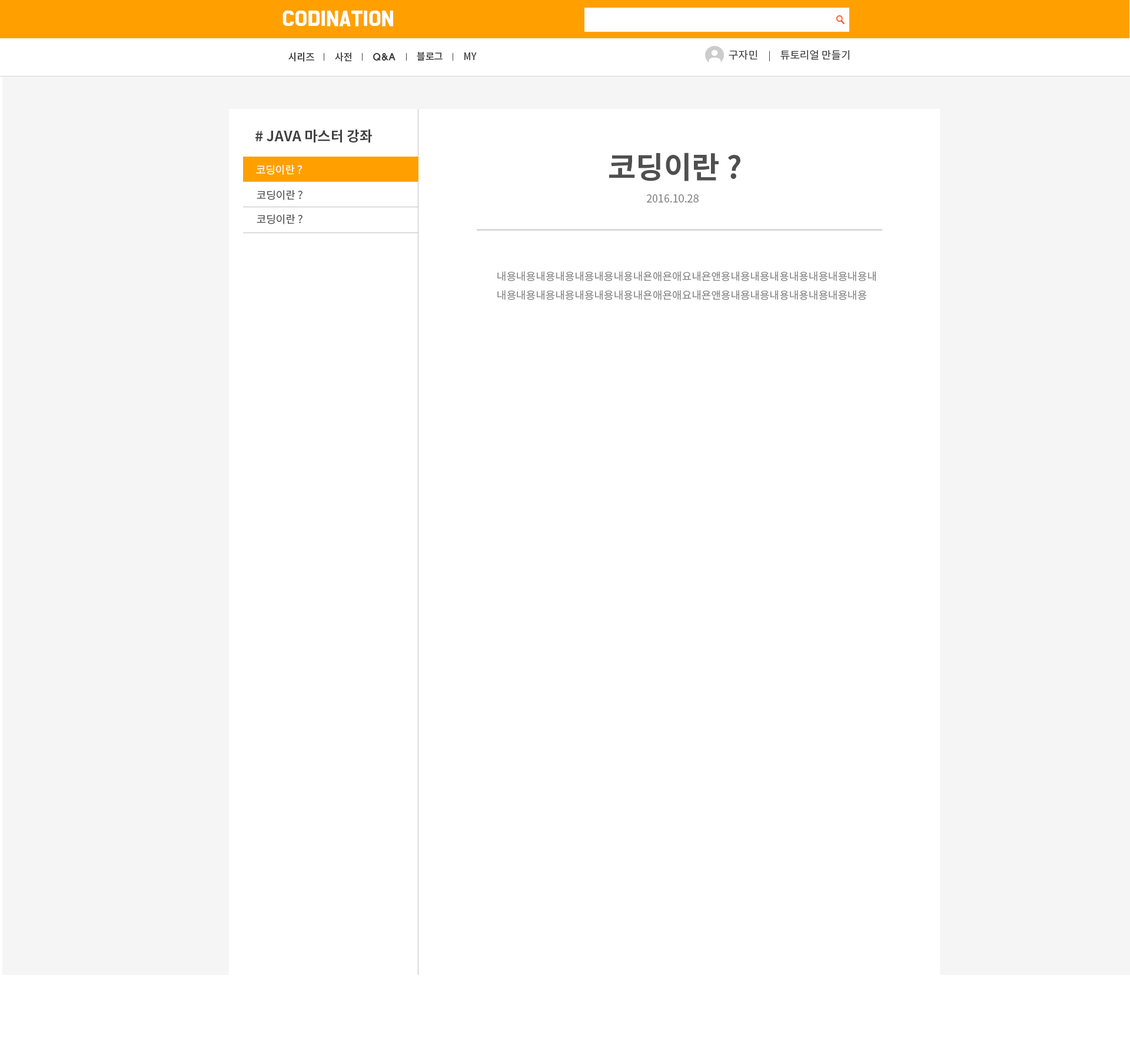
<style>
.page{position:relative;width:1130px;height:1055px;background:#ffffff}
.page>*{position:absolute;margin:0}
.t1{font:17.7px "BMDoHyeon";color:#ffffff;font-weight:bold}
.t2{font:9.8px "NotoSansCJKkr-Medium";letter-spacing:-0.01em;color:#424242}
.t3{font:9.8px "HYwulB";letter-spacing:-0.025em;color:#424242}
.t4{font:10.6px "NotoSansCJKkr-Regular";color:#424242}
.t5{font:14.1px "NotoSansCJKkr-Bold";color:#424242}
.t6{font:30.3px "NotoSansCJKkr-Bold";color:#4f4f4f}
.t7{font:10.6px "NotoSansCJKkr-Regular";color:#ffffff}
.t8{font:10.6px "NotoSansCJKkr-Regular";color:#505050}
.t9{font:10.6px "NotoSansCJKkr-Regular";color:#888888}
</style>
<div class="page">
<p class="t1" style="left:283px;top:11px;width:110px;height:15px">CODINATION</p>
<p class="t2" style="left:288px;top:52px;width:26px;height:10px">시리즈</p>
<p class="t2" style="left:335px;top:52px;width:17px;height:10px">사전</p>
<p class="t3" style="left:373px;top:53px;width:23px;height:8px">Q&amp;A</p>
<p class="t2" style="left:417px;top:52px;width:26px;height:9px">블로그</p>
<p class="t2" style="left:464px;top:52px;width:13px;height:8px">MY</p>
<p class="t4" style="left:729px;top:50px;width:29px;height:10px">구자민</p>
<p class="t4" style="left:781px;top:50px;width:69px;height:10px">튜토리얼 만들기</p>
<p class="t5" style="left:255px;top:129px;width:117px;height:14px"># JAVA 마스터 강좌</p>
<p class="t6" style="left:609px;top:152px;width:132px;height:29px">코딩이란 ?</p>
<p class="t7" style="left:256px;top:165px;width:46px;height:10px">코딩이란 ?</p>
<p class="t8" style="left:257px;top:190px;width:46px;height:10px">코딩이란 ?</p>
<p class="t9" style="left:647px;top:194px;width:52px;height:9px">2016.10.28</p>
<p class="t8" style="left:257px;top:214px;width:46px;height:10px">코딩이란 ?</p>
<p class="t9" style="left:497px;top:271px;width:379px;height:29px">내용내용내용내용내용내용내용내욘애욘애요내욘앤용내용내용내용내용내용내용내용내<br>내용내용내용내용내용내용내용내욘애욘애요내욘앤용내용내용내용내용내용내용내용</p>
</div>
